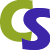
<style>
.page{position:relative;width:50px;height:50px;background:#ffffff}
.page>*{position:absolute;margin:0}
.t1{font:61px "ErasITC-Bold";letter-spacing:0.1em;color:#91a826;scale:0.9 1}
.t2{font:60px "ErasITC-Bold";letter-spacing:0.1em;color:#3d26a8}
</style>
<div class="page">
<p class="t1" style="left:0px;top:0px;width:33px;height:42px">C</p>
<p class="t2" style="left:21px;top:8px;width:30px;height:42px">S</p>
</div>
